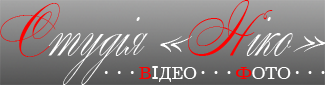
<style>
.page{position:relative;width:325px;height:85px}
.page>*{position:absolute;margin:0}
.t1{font:61.7px "WolfgangAmadeusMozart";color:#ffffff;scale:0.91 1}
.t2{font:61.7px "WolfgangAmadeusMozart";color:#ff0000;scale:0.91 1}
.t3{font:17.7px "Journal";color:#ffffff}
.t4{font:17.7px "Journal";color:#ff0000}
.t5{font:17.7px "Verdana";color:#ffffff}
</style>
<div class="page">
<p class="t1" style="left:0px;top:0px;width:326px;height:85px"><span class="t2">С</span>тудiя «<span class="t2">Н</span>iко»</p>
<p class="t3" style="left:104px;top:66px;width:221px;height:16px">•••<span class="t4">В</span><span class="t5">І</span>ДЕО•••<span class="t4">Ф</span>ОТО•••</p>
</div>
